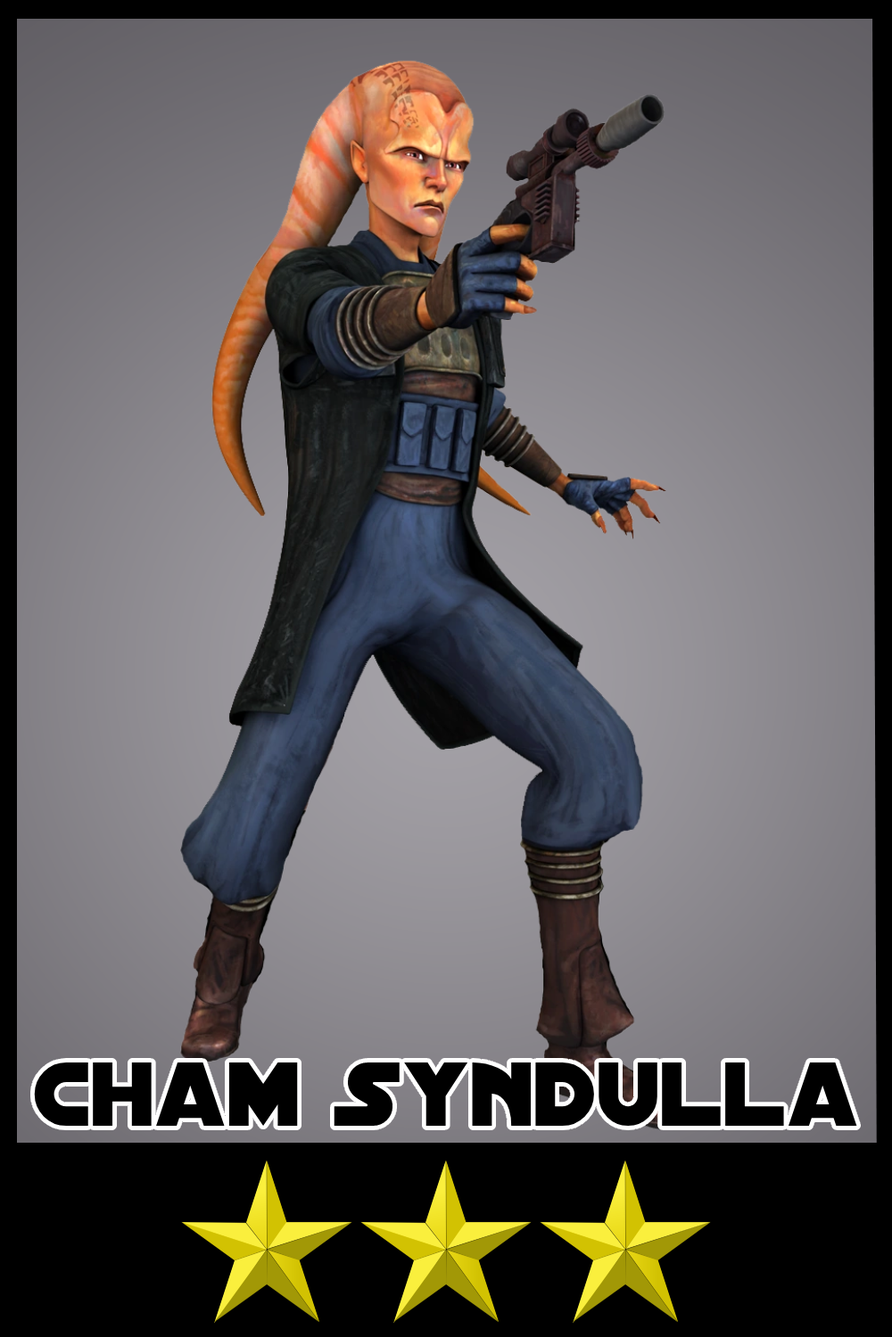
<style>
.page{position:relative;width:892px;height:1337px}
.page>*{position:absolute;margin:0}
.t1{font:97.2px "DistantGalaxy";color:#000000}
</style>
<div class="page">
<p class="t1" style="left:34px;top:1063px;width:823px;height:63px">Cham Syndulla</p>
</div>
